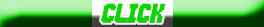
<style>
.page{position:relative;width:264px;height:27px}
.page>*{position:absolute;margin:0}
.t1{font:20.8px "Abduction2000";color:#0cd502}
</style>
<div class="page">
<p class="t1" style="left:101px;top:3px;width:65px;height:20px">click</p>
</div>
